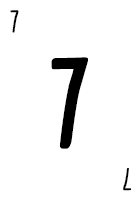
<style>
.page{position:relative;width:140px;height:200px;background:#ffffff}
.page>*{position:absolute;margin:0}
.t1{font:28.7px "CardenioModern-Reg";letter-spacing:-0.1em;color:#000000;text-transform:uppercase;font-weight:bold;scale:0.87 1}
.t2{font:115px "CardenioModern-Bold";letter-spacing:-0.1em;color:#000000;text-transform:uppercase;font-weight:bold;scale:0.87 1}
</style>
<div class="page">
<p class="t1" style="left:10px;top:10px;width:9px;height:23px">7</p>
<p class="t2" style="left:51px;top:57px;width:37px;height:92px">7</p>
<p class="t1" style="left:123px;top:168px;width:9px;height:23px;rotate:180deg">7</p>
</div>
